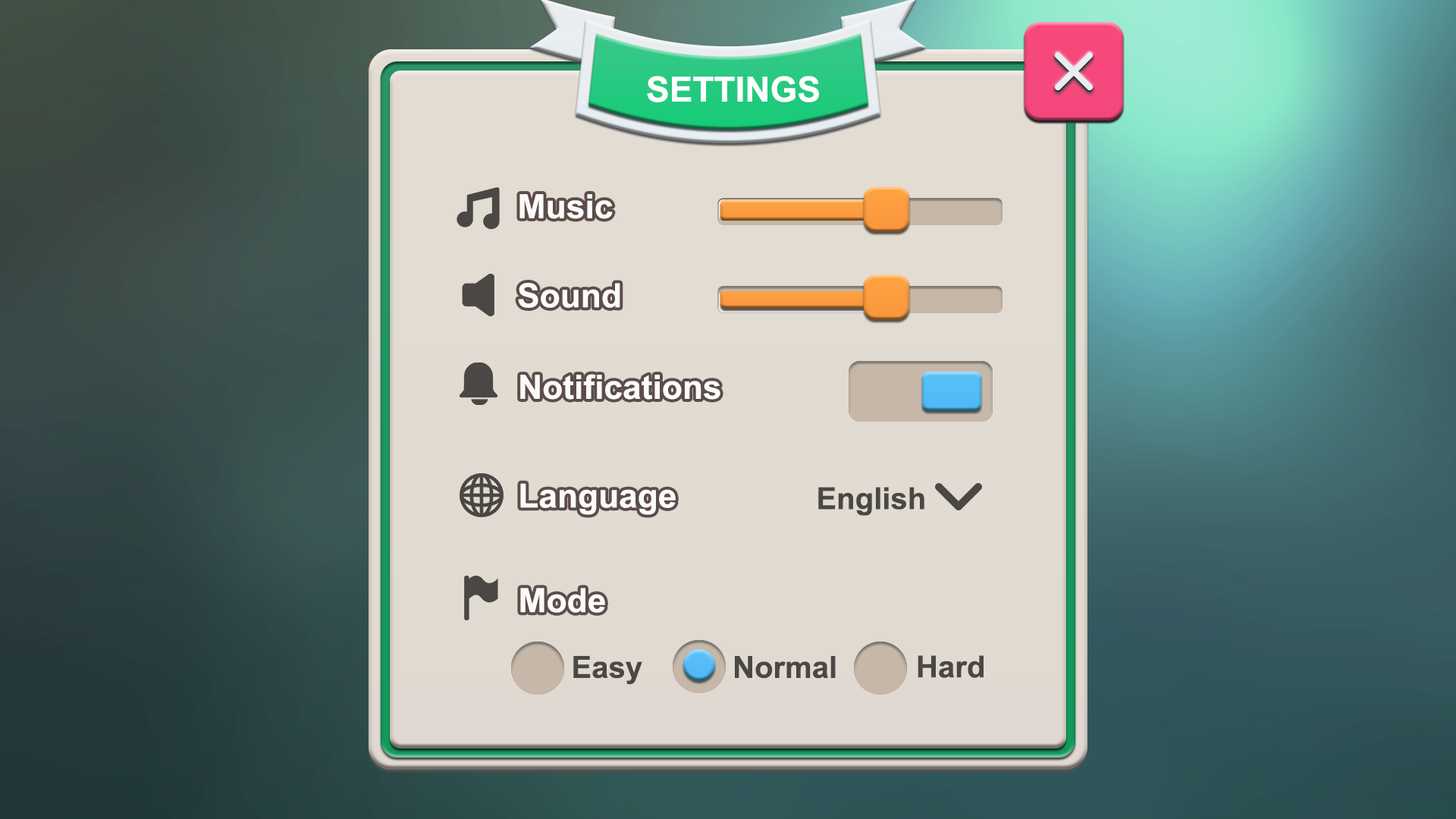
<style>
.page{position:relative;width:1456px;height:819px}
.page>*{position:absolute;margin:0}
.t1{font:34.9px "Arial-BoldMT";color:#ffffff}
.t2{font:33.4px "Arial-BoldMT";color:#ffffff}
.t3{font:30.3px "Arial-BoldMT";color:#4a4744}
.t4{font:30.4px "Arial-BoldMT";color:#4a4744}
</style>
<div class="page">
<p class="t1" style="left:647px;top:76px;width:172px;height:26px">SETTINGS</p>
<p class="t2" style="left:519px;top:194px;width:94px;height:25px">Music</p>
<p class="t2" style="left:518px;top:283px;width:102px;height:25px">Sound</p>
<p class="t2" style="left:520px;top:374px;width:200px;height:26px">Notifications</p>
<p class="t2" style="left:520px;top:483px;width:156px;height:32px">Language</p>
<p class="t3" style="left:818px;top:487px;width:106px;height:29px">English</p>
<p class="t2" style="left:520px;top:588px;width:85px;height:25px">Mode</p>
<p class="t4" style="left:573px;top:656px;width:69px;height:29px">Easy</p>
<p class="t4" style="left:735px;top:656px;width:101px;height:23px">Normal</p>
<p class="t4" style="left:918px;top:655px;width:66px;height:23px">Hard</p>
</div>
